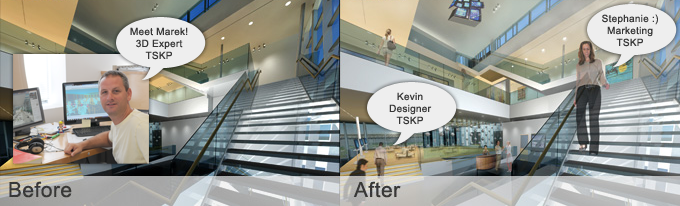
<style>
.page{position:relative;width:680px;height:206px}
.page>*{position:absolute;margin:0}
.t1{font:10px/12px "ArialMT";letter-spacing:0.025em;color:#383838}
</style>
<div class="page">
<p class="t1" style="left:602px;top:14px;width:56px;height:33px;text-align:center">Stephanie :)<br>Marketing<br>TSKP</p>
<p class="t1" style="left:130px;top:27px;width:58px;height:33px;text-align:center">Meet Marek!<br>3D Expert<br>TSKP</p>
<p class="t1" style="left:389px;top:92px;width:43px;height:33px;text-align:center">Kevin<br>Designer<br>TSKP</p>
</div>
